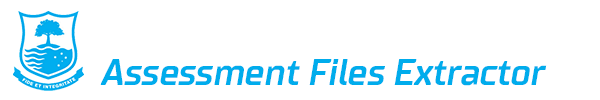
<style>
.page{position:relative;width:600px;height:100px;background:#ffffff}
.page>*{position:absolute;margin:0}
.t1{font:36px "TTSupermolot-BoldItalic";color:#00acec}
</style>
<div class="page">
<p class="t1" style="left:100px;top:59px;width:447px;height:27px">Assessment Files Extractor</p>
</div>
